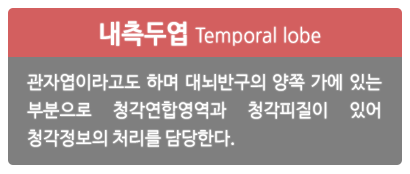
<style>
.page{position:relative;width:410px;height:174px;background:#7f7f7f}
.page>*{position:absolute;margin:0}
.t1{font:20px "NanumGothic";letter-spacing:0.01em;color:#ffffff;scale:0.94 1}
.t2{font:25.7px "NanumBarunGothic";letter-spacing:0.01em;color:#ffffff;font-weight:bold;scale:0.94 1}
.t3{font:18px/28px "NanumBarunGothic";letter-spacing:0.01em;color:#ffffff}
</style>
<div class="page">
<p class="t1" style="left:100px;top:21px;width:221px;height:25px"><span class="t2">내측두엽 </span>Temporal lobe</p>
<p class="t3" style="left:27px;top:73px;width:355px;height:74px;text-align:justify">관자엽이라고도 하며 대뇌반구의 양쪽 가에 있는 부분으로 청각연합영역과 청각피질이 있어 청각정보의 처리를 담당한다.</p>
</div>
